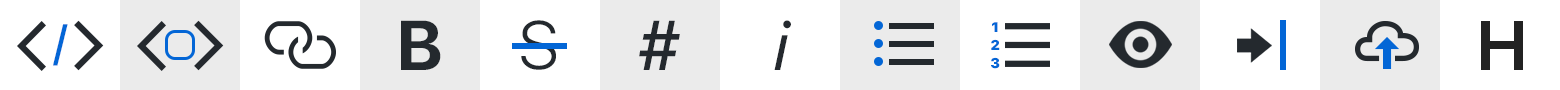
<style>
.page{position:relative;width:1560px;height:90px;background:#ffffff}
.page>*{position:absolute;margin:0}
.t1{font:48px "SFUIDisplay-Medium";letter-spacing:0.16em;color:#0366d6}
.t2{font:70px "SFUIDisplay-Bold";letter-spacing:0.16em;color:#24292e}
.t3{font:68px "SFUIDisplay-Light";letter-spacing:0.16em;color:#24292e}
.t4{font:70px "SFUIDisplay-Medium";letter-spacing:0.16em;color:#24292e}
.t5{font:66px "SFUIText-RegularItalic";letter-spacing:0.16em;color:#24292e}
.t6{font:14px "SFUIDisplay-Black";letter-spacing:0.16em;color:#0366d6}
.t7{font:70px "SFUIDisplay-Semibold";letter-spacing:-0.01em;color:#222222}
</style>
<div class="page">
<p class="t1" style="left:53px;top:24px;width:15px;height:42px">/</p>
<p class="t2" style="left:401px;top:20px;width:40px;height:50px">B</p>
<p class="t3" style="left:521px;top:20px;width:35px;height:50px">S</p>
<p class="t4" style="left:639px;top:20px;width:41px;height:50px">#</p>
<p class="t5" style="left:774px;top:20px;width:17px;height:50px">i</p>
<p class="t6" style="left:992px;top:22px;width:6px;height:10px">1</p>
<p class="t7" style="left:1481px;top:21px;width:42px;height:49px">H</p>
<p class="t6" style="left:991px;top:39px;width:9px;height:11px">2</p>
<p class="t6" style="left:991px;top:57px;width:9px;height:12px">3</p>
</div>
